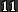
<style>
.page{position:relative;width:18px;height:12px;background:#333333}
.page>*{position:absolute;margin:0}
.t1{font:17px "Perpetua-Bold";color:#ffffff}
</style>
<div class="page">
<p class="t1" style="left:2px;top:1px;width:13px;height:10px">11</p>
</div>
